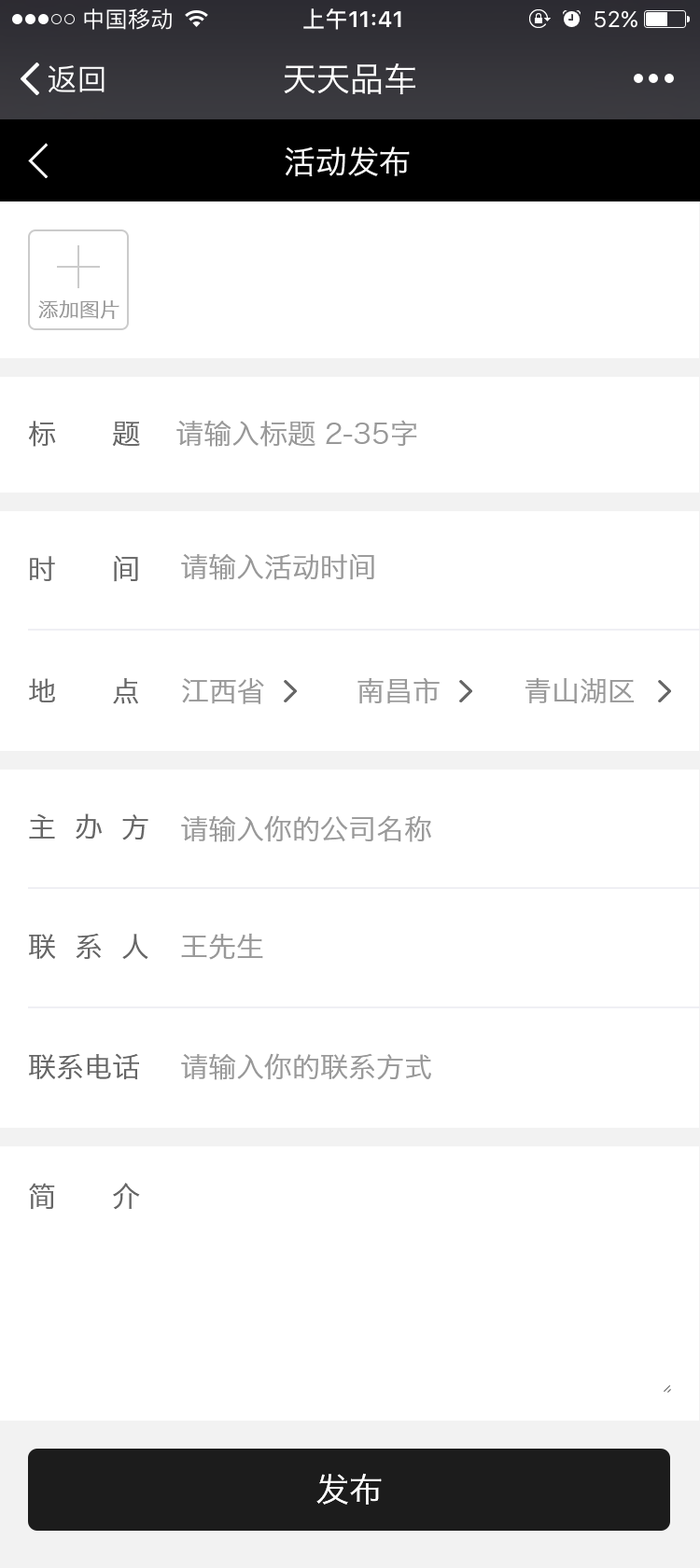
<style>
.page{position:relative;width:700px;height:1568px;background:#ffffff}
.page>*{position:absolute;margin:0}
.t1{font:33.6px "HiraginoSansGB-W3";color:#ffffff}
.t2{font:31.7px "HiraginoSansGB-W3";color:#ffffff}
.t3{font:20.5px "HiraginoSansGB-W3";color:#999999}
.t4{font:28px "HiraginoSansGB-W3";color:#666666;text-transform:uppercase}
.t5{font:28px "HiraginoSansGB-W3";color:#999999;text-transform:uppercase}
.t6{font:33.6px "HiraginoSansGB-W3";color:#ffffff;text-transform:uppercase}
</style>
<div class="page">
<p class="t1" style="left:284px;top:63px;width:131px;height:32px">天天品车</p>
<p class="t2" style="left:284px;top:146px;width:125px;height:30px">活动发布</p>
<p class="t3" style="left:38px;top:300px;width:81px;height:19px">添加图片</p>
<p class="t4" style="left:28px;top:421px;width:112px;height:26px">标      题</p>
<p class="t5" style="left:176px;top:420px;width:241px;height:27px">请输入标题 2-35字</p>
<p class="t4" style="left:30px;top:555px;width:108px;height:27px">时      间</p>
<p class="t5" style="left:181px;top:553px;width:193px;height:27px">请输入活动时间</p>
<p class="t5" style="left:357px;top:677px;width:82px;height:27px">南昌市</p>
<p class="t5" style="left:525px;top:677px;width:108px;height:27px">青山湖区</p>
<p class="t4" style="left:29px;top:678px;width:109px;height:26px">地      点</p>
<p class="t5" style="left:182px;top:678px;width:82px;height:26px">江西省</p>
<p class="t4" style="left:29px;top:813px;width:119px;height:27px">主  办  方</p>
<p class="t5" style="left:181px;top:815px;width:250px;height:27px">请输入你的公司名称</p>
<p class="t4" style="left:29px;top:933px;width:119px;height:26px">联  系  人</p>
<p class="t5" style="left:181px;top:933px;width:82px;height:27px">王先生</p>
<p class="t4" style="left:29px;top:1053px;width:110px;height:27px">联系电话</p>
<p class="t5" style="left:181px;top:1053px;width:250px;height:27px">请输入你的联系方式</p>
<p class="t4" style="left:29px;top:1183px;width:111px;height:27px">简      介</p>
<p class="t6" style="left:316px;top:1473px;width:66px;height:32px">发布</p>
</div>
